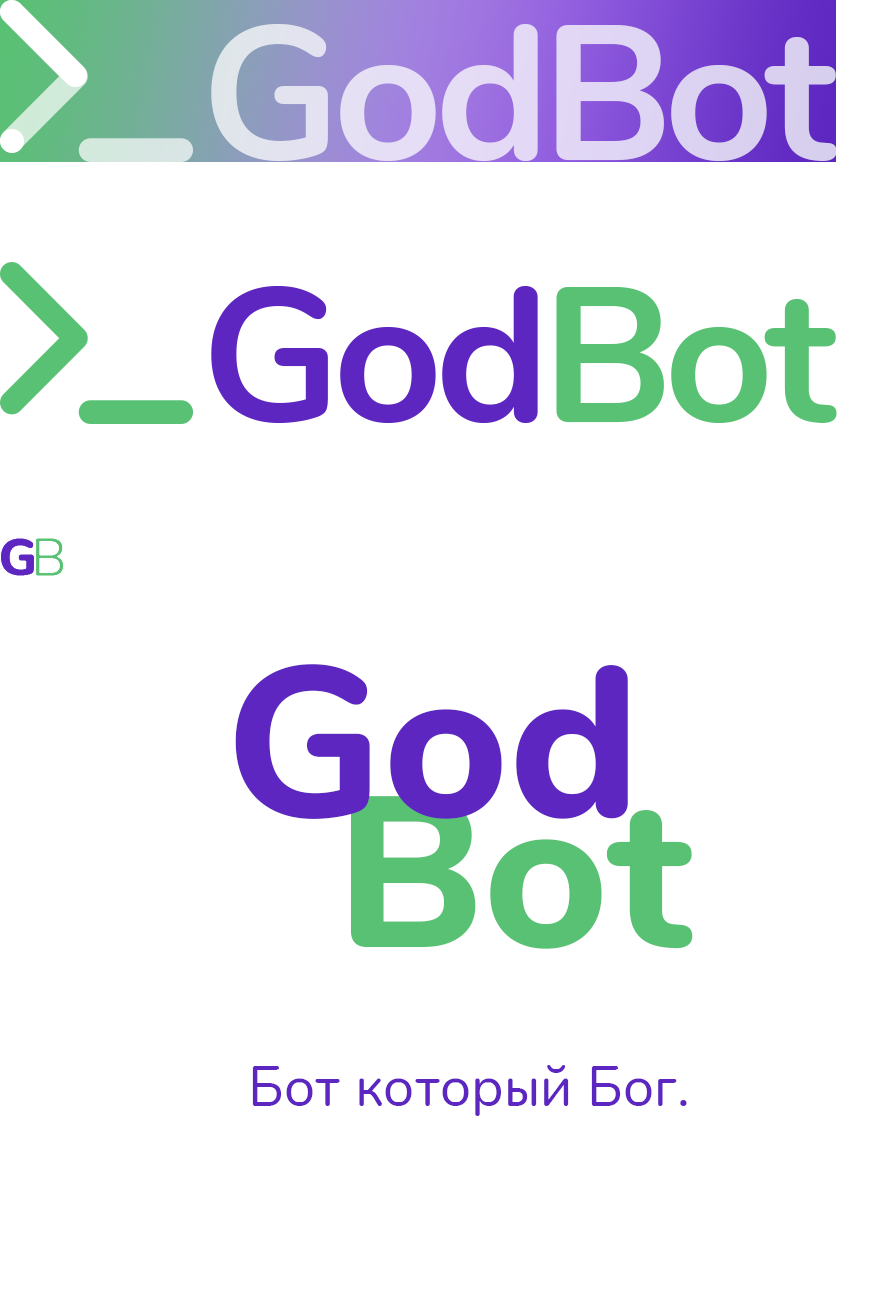
<style>
.page{position:relative;width:880px;height:1308px;background:#ffffff}
.page>*{position:absolute;margin:0}
.t1{font:190.7px "Nunito-Bold";letter-spacing:-0.04em;color:#e1d9f3}
.t2{font:190.7px "Nunito-Bold";letter-spacing:-0.04em}
.t3{font:53.1px "Nunito-Black";letter-spacing:-0.12em;color:#5d26c1}
.t4{font:53.1px "Nunito-Regular";letter-spacing:0.1em;color:#59c173}
.t5{font:213.9px "Nunito-ExtraBold";color:#5d26c1}
.t6{font:213.9px "Nunito-ExtraBold";color:#59c173}
.t7{font:56.3px "Nunito-Regular";color:#5d26c1}
</style>
<div class="page">
<p class="t1" style="left:211px;top:24px;width:626px;height:137px">GodBot</p>
<p class="t2" style="left:211px;top:286px;width:626px;height:137px">GodBot</p>
<p class="t3" style="left:0px;top:538px;width:64px;height:38px">G<span class="t4">B</span></p>
<p class="t5" style="left:235px;top:664px;width:393px;height:155px">God</p>
<p class="t6" style="left:350px;top:796px;width:343px;height:153px">Bot</p>
<p class="t7" style="left:252px;top:1065px;width:435px;height:51px">Бот который Бог.</p>
</div>
